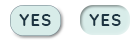
<style>
.page{position:relative;width:140px;height:40px;background:#ffffff}
.page>*{position:absolute;margin:0}
.t1{font:16.7px "#9Slide03QuicksandBold-Bold";letter-spacing:0.075em;color:#1c3442;text-transform:uppercase}
</style>
<div class="page">
<p class="t1" style="left:19px;top:14px;width:32px;height:12px">yes</p>
<p class="t1" style="left:89px;top:14px;width:32px;height:12px">yes</p>
</div>
